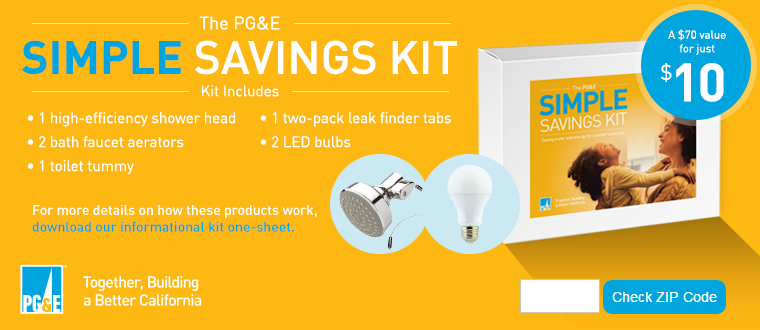
<style>
.page{position:relative;width:760px;height:330px;background:#fdb813}
.page>*{position:absolute;margin:0}
.t1{font:46px/25.7px "DINOT-Medium";color:#ffffff;text-transform:uppercase}
.t2{font:18px/50.5px "DINOT";color:#ffffff;text-transform:uppercase}
.t3{font:18px/50.5px "DINOT";color:#ffffff}
.t4{font:46px/48.4px "DINOT-Bold";color:#00a5df;text-transform:uppercase}
.t5{font:46px/35px "DINOT-Bold";color:#00a5df;text-transform:uppercase}
.t6{font:46px/35px "DINOT-Medium";color:#ffffff;text-transform:uppercase}
.t7{font:11.4px "DINOT";color:#ffffff}
.t8{font:53.1px "DINOT-Bold";letter-spacing:-0.04em;color:#ffffff}
.t9{font:35.4px "DINOT";letter-spacing:-0.08em;color:#ffffff}
.t10{font:15px "DINOT";color:#ffffff}
.t11{font:15px/24px "DINOT";color:#ffffff}
.t12{font:17px/24px "DINOT-Bold";color:#ffffff}
.t13{font:14px/16.7px "DINOT-Medium";color:#ffffff}
.t14{font:14px/16.7px "DINOT-Medium";color:#00a5df}
</style>
<div class="page">
<p class="t1" style="left:22px;top:16px;width:435px;height:59px;text-align:center"><span class="t2">T</span><span class="t3">he</span><span class="t2"> PG&amp;E<br></span><span class="t4">Sim</span><span class="t5">ple </span><span class="t6">S</span>avings Kit</p>
<p class="t7" style="left:668px;top:29px;width:58px;height:26px;text-align:center">A $70 value <br>for just</p>
<p class="t8" style="left:661px;top:63px;width:63px;height:39px"><span class="t9">$</span>10</p>
<p class="t10" style="left:202px;top:85px;width:77px;height:12px">Kit Includes</p>
<p class="t11" style="left:28px;top:112px;width:207px;height:63px;text-align:right">• 1 high-efficiency shower head<br>• 2 bath faucet aerators<br>• 1 toilet tummy</p>
<p class="t11" style="left:261px;top:112px;width:190px;height:36px;text-align:right">• 1 two-pack leak finder tabs<br>• 2 LED bulbs<br><span class="t12"></span></p>
<p class="t13" style="left:32px;top:205px;width:285px;height:27px;text-align:right">For more details on how these products work, <br><span class="t14">download our informational kit one-sheet.</span></p>
</div>
